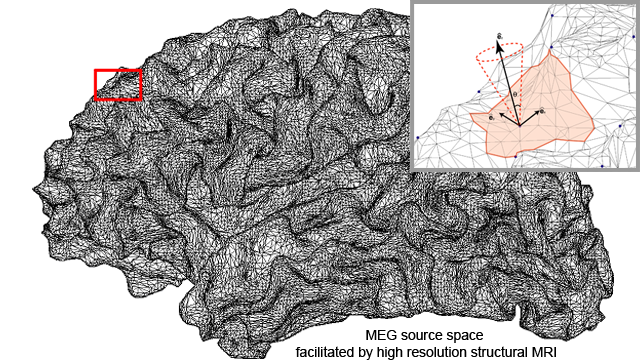
<style>
.page{position:relative;width:640px;height:360px;background:#ffffff}
.page>*{position:absolute;margin:0}
.t1{font:13.9px "ArialMT";color:#000000}
</style>
<div class="page">
<p class="t1" style="left:295px;top:330px;width:261px;height:30px;text-align:center">MEG source space <br>facilitated by high resolution structural MRI</p>
</div>
